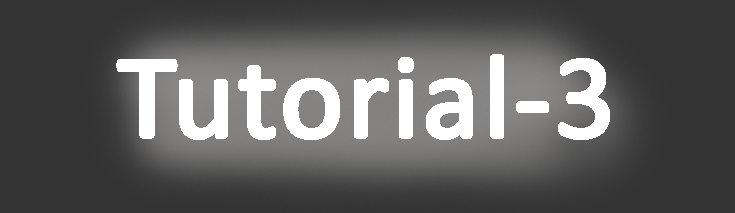
<style>
.page{position:relative;width:735px;height:213px;background:#333333}
.page>*{position:absolute;margin:0}
.t1{font:120px "Calibri";color:#ffffff;font-weight:bold}
</style>
<div class="page">
<p class="t1" style="left:116px;top:54px;width:494px;height:86px">Tutorial-3</p>
</div>
